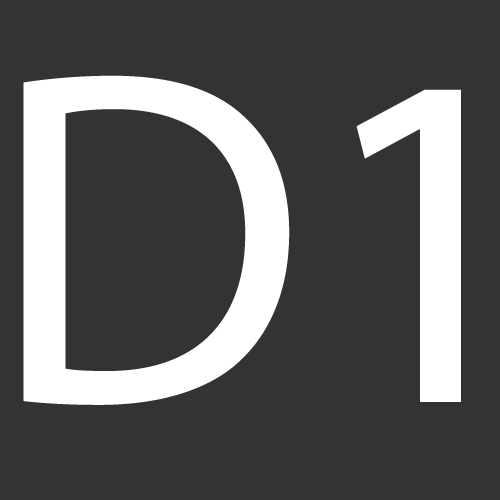
<style>
.page{position:relative;width:500px;height:500px;background:#333333}
.page>*{position:absolute;margin:0}
.t1{font:480.2px "MyriadPro-Regular";color:#ffffff}
</style>
<div class="page">
<p class="t1" style="left:23px;top:75px;width:438px;height:330px">D1</p>
</div>
